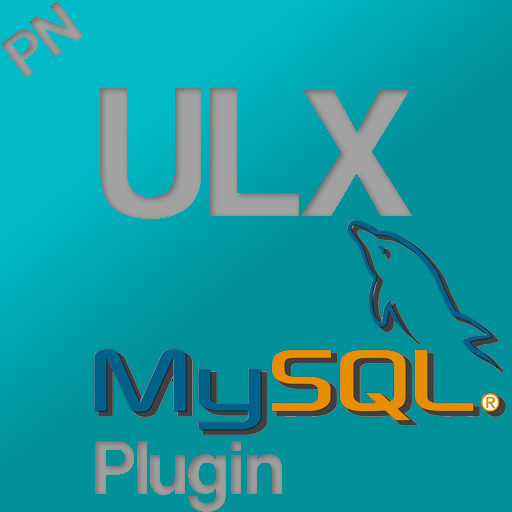
<style>
.page{position:relative;width:512px;height:512px;background:#00919a}
.page>*{position:absolute;margin:0}
.t1{font:65px "CoolveticaRg-Regular";color:#a2a2a2}
.t2{font:189px "CoolveticaRg-Regular";color:#a2a2a2}
.t3{font:77.8px "CoolveticaRg-Regular";color:#a2a2a2}
</style>
<div class="page">
<p class="t1" style="left:1px;top:1px;width:82px;height:77px;rotate:-37deg">PN</p>
<p class="t2" style="left:100px;top:88px;width:313px;height:131px">ULX</p>
<p class="t3" style="left:95px;top:441px;width:187px;height:71px">Plugin</p>
</div>
